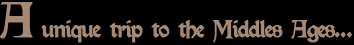
<style>
.page{position:relative;width:354px;height:45px;background:#000000}
.page>*{position:absolute;margin:0}
.t1{font:21.5px "Kelmscott-Regular";letter-spacing:-0.075em;color:#a68973;font-weight:bold}
.t2{font:44px "Kelmscott-Regular";letter-spacing:-0.075em;color:#a68973;font-weight:bold}
</style>
<div class="page">
<p class="t1" style="left:0px;top:2px;width:352px;height:41px"><span class="t2">A</span> unique trip to the Middles Ages...</p>
</div>
